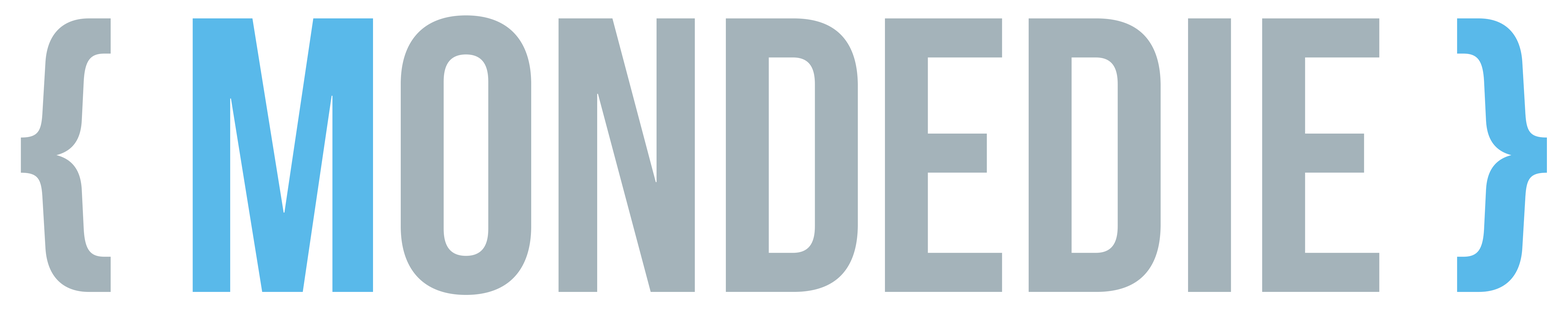
<style>
.page{position:relative;width:1568px;height:310px;background:#ffffff}
.page>*{position:absolute;margin:0}
.t1{font:390.5px "BebasNeue";color:#a4b3ba}
.t2{font:390.5px "BebasNeue";color:#59b9ea}
</style>
<div class="page">
<p class="t1" style="left:21px;top:15px;width:1526px;height:280px">{ <span class="t2">M</span>ONDEDIE <span class="t2">}</span></p>
</div>
